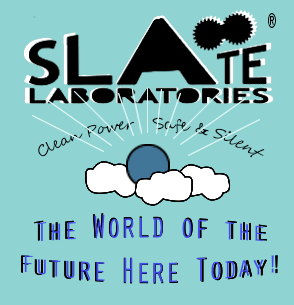
<style>
.page{position:relative;width:294px;height:305px;background:#8fd4d3}
.page>*{position:absolute;margin:0}
.t1{font:22.4px "OratorStd";color:#000000;scale:0.62 1}
.t2{font:14px "SegoeScript";color:#010101}
.t3{font:14px "SegoeScript";color:#000000}
.t4{font:24.9px "OratorStd"}
.t5{font:24px "OratorStd";color:#444ceb}
</style>
<div class="page">
<p class="t1" style="left:268px;top:13px;width:8px;height:15px">®</p>
<p class="t2" style="left:38px;top:121px;width:97px;height:36px;rotate:-17deg">Clean Power</p>
<p class="t3" style="left:152px;top:117px;width:113px;height:41px;rotate:17deg">Safe &amp; Silent</p>
<p class="t4" style="left:21px;top:213px;width:257px;height:71px">The World of the <br>Future Here Today!</p>
<p class="t4" style="left:21px;top:213px;width:257px;height:71px">The World of the <br>Future Here Today!</p>
<p class="t4" style="left:21px;top:213px;width:257px;height:71px">The World of the <br>Future Here Today!</p>
<p class="t5" style="left:24px;top:214px;width:250px;height:69px">The World of the <br>Future Here Today!</p>
</div>
